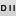
<style>
.page{position:relative;width:16px;height:16px}
.page>*{position:absolute;margin:0}
.t1{font:8.3px "ArialMT";color:#000000}
</style>
<div class="page">
<p class="t1" style="left:1px;top:5px;width:14px;height:6px">D i l</p>
<p class="t1" style="left:1px;top:5px;width:14px;height:6px;text-align:center">D i l<br>l</p>
</div>
